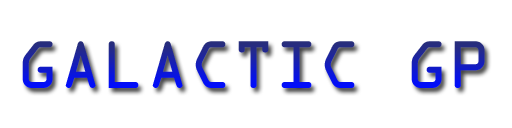
<style>
.page{position:relative;width:512px;height:128px;background:#ffffff}
.page>*{position:absolute;margin:0}
.t1{font:60px "OCRAStd"}
</style>
<div class="page">
<p class="t1" style="left:22px;top:41px;width:463px;height:47px">GALACTIC GP</p>
</div>
